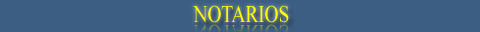
<style>
.page{position:relative;width:480px;height:32px;background:#3c5e83}
.page>*{position:absolute;margin:0}
.t1{font:24px "TimesNewRomanPSMT";color:#ffff01;scale:0.8 1}
</style>
<div class="page">
<p class="t1" style="left:193px;top:5px;width:96px;height:18px">NOTARIOS</p>
</div>
